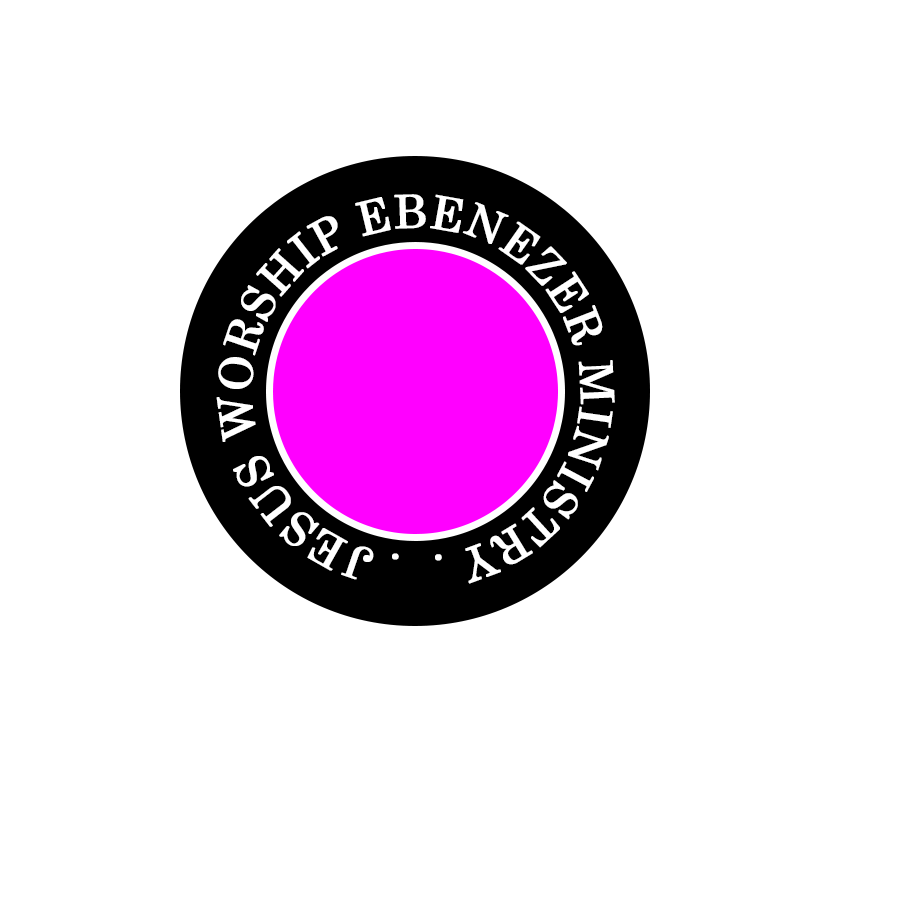
<style>
.page{position:relative;width:900px;height:900px;background:#ffffff}
.page>*{position:absolute;margin:0}
.t1{font:45.8px "Century";letter-spacing:-0.01em;color:#ffffff;font-weight:bold}
</style>
<div class="page">
<p class="t1" style="left:216px;top:194px;width:399px;height:390px">. JESUS WORSHIP EBENEZER MINISTRY .</p>
</div>
